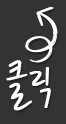
<style>
.page{position:relative;width:66px;height:124px;background:#333333}
.page>*{position:absolute;margin:0}
.t1{font:52.1px "DXMusicalL-KSCpc-EUC-H";color:#fefefe;font-weight:bold}
</style>
<div class="page">
<p class="t1" style="left:6px;top:60px;width:45px;height:51px">클릭</p>
</div>
